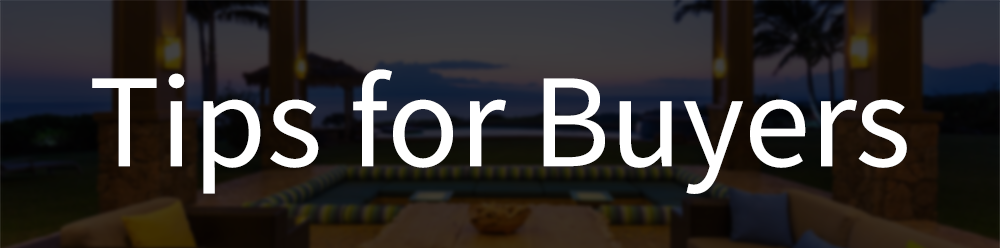
<style>
.page{position:relative;width:1000px;height:248px}
.page>*{position:absolute;margin:0}
.t1{font:133.4px "SourceSansPro-Regular";color:#ffffff}
</style>
<div class="page">
<p class="t1" style="left:92px;top:69px;width:815px;height:125px">Tips for Buyers</p>
</div>
